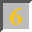
<style>
.page{position:relative;width:32px;height:32px;background:#bbbbbb}
.page>*{position:absolute;margin:0}
.t1{font:25px "TimesNewRomanPS-BoldMT";color:#ffc600}
</style>
<div class="page">
<p class="t1" style="left:10px;top:8px;width:11px;height:17px">6</p>
</div>
